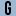
<style>
.page{position:relative;width:16px;height:16px;background:#9db8d0}
.page>*{position:absolute;margin:0}
.t1{font:19.3px "BebasNeue";color:#010101}
</style>
<div class="page">
<p class="t1" style="left:5px;top:1px;width:6px;height:14px">G</p>
</div>
